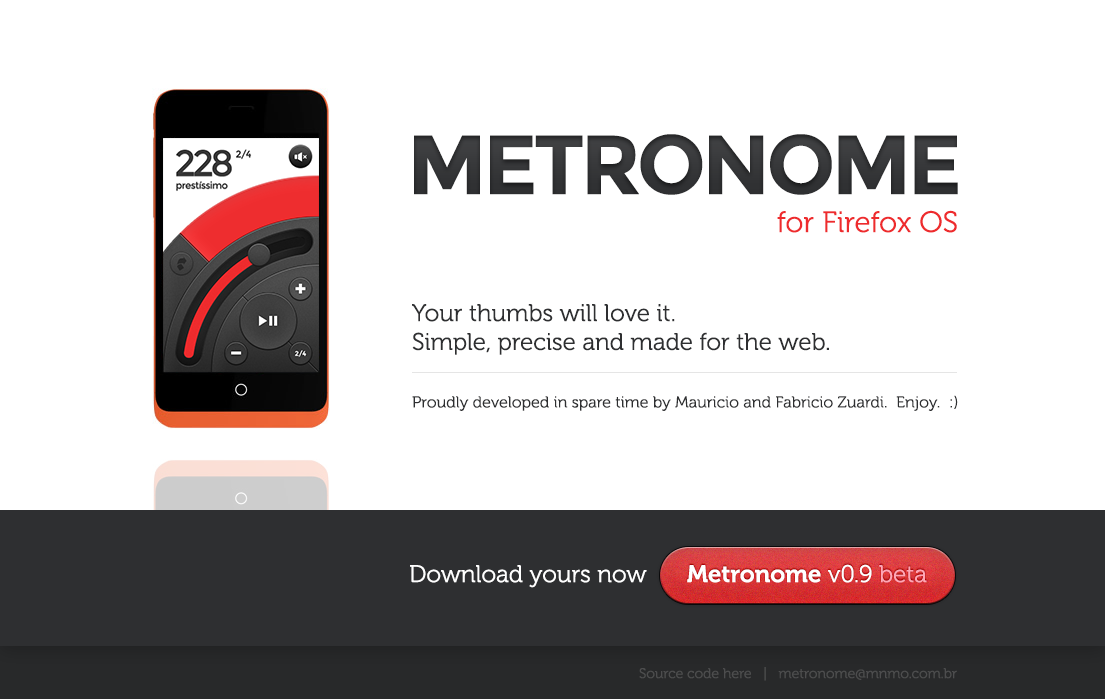
<style>
.page{position:relative;width:1105px;height:699px;background:#ffffff}
.page>*{position:absolute;margin:0}
.t1{font:83.7px "Montserrat-Bold";letter-spacing:-0.05em;color:#2e2f31;text-transform:uppercase}
.t2{font:29.4px "Museo-300";color:#ee2b2d}
.t3{font:16px "Museo-300";color:#2e2f31}
.t4{font:24px "Museo-300";color:#2e2f31}
.t5{font:24px "Museo-300";color:#ffffff}
.t6{font:24px "Museo-700";color:#ffffff}
.t7{font:24px "Museo-300";color:#ffa6b5}
.t8{font:14px "Museo-300";color:#4d4d4e}
</style>
<div class="page">
<p class="t1" style="left:414px;top:134px;width:544px;height:61px">Metronome</p>
<p class="t2" style="left:777px;top:210px;width:180px;height:23px">for Firefox OS</p>
<p class="t3" style="left:412px;top:304px;width:546px;height:107px"><span class="t4">Your thumbs will love it.<br>Simple, precise and made for the web.<br></span><br><br>Proudly developed in spare time by Mauricio and Fabricio Zuardi.  Enjoy.  :)</p>
<p class="t5" style="left:410px;top:565px;width:237px;height:23px">Download yours now</p>
<p class="t6" style="left:687px;top:564px;width:240px;height:19px">Metronome<span class="t5"> v0.9 </span><span class="t7">beta</span></p>
<p class="t8" style="left:639px;top:667px;width:318px;height:14px">Source code here   |   metronome@mnmo.com.br</p>
</div>
